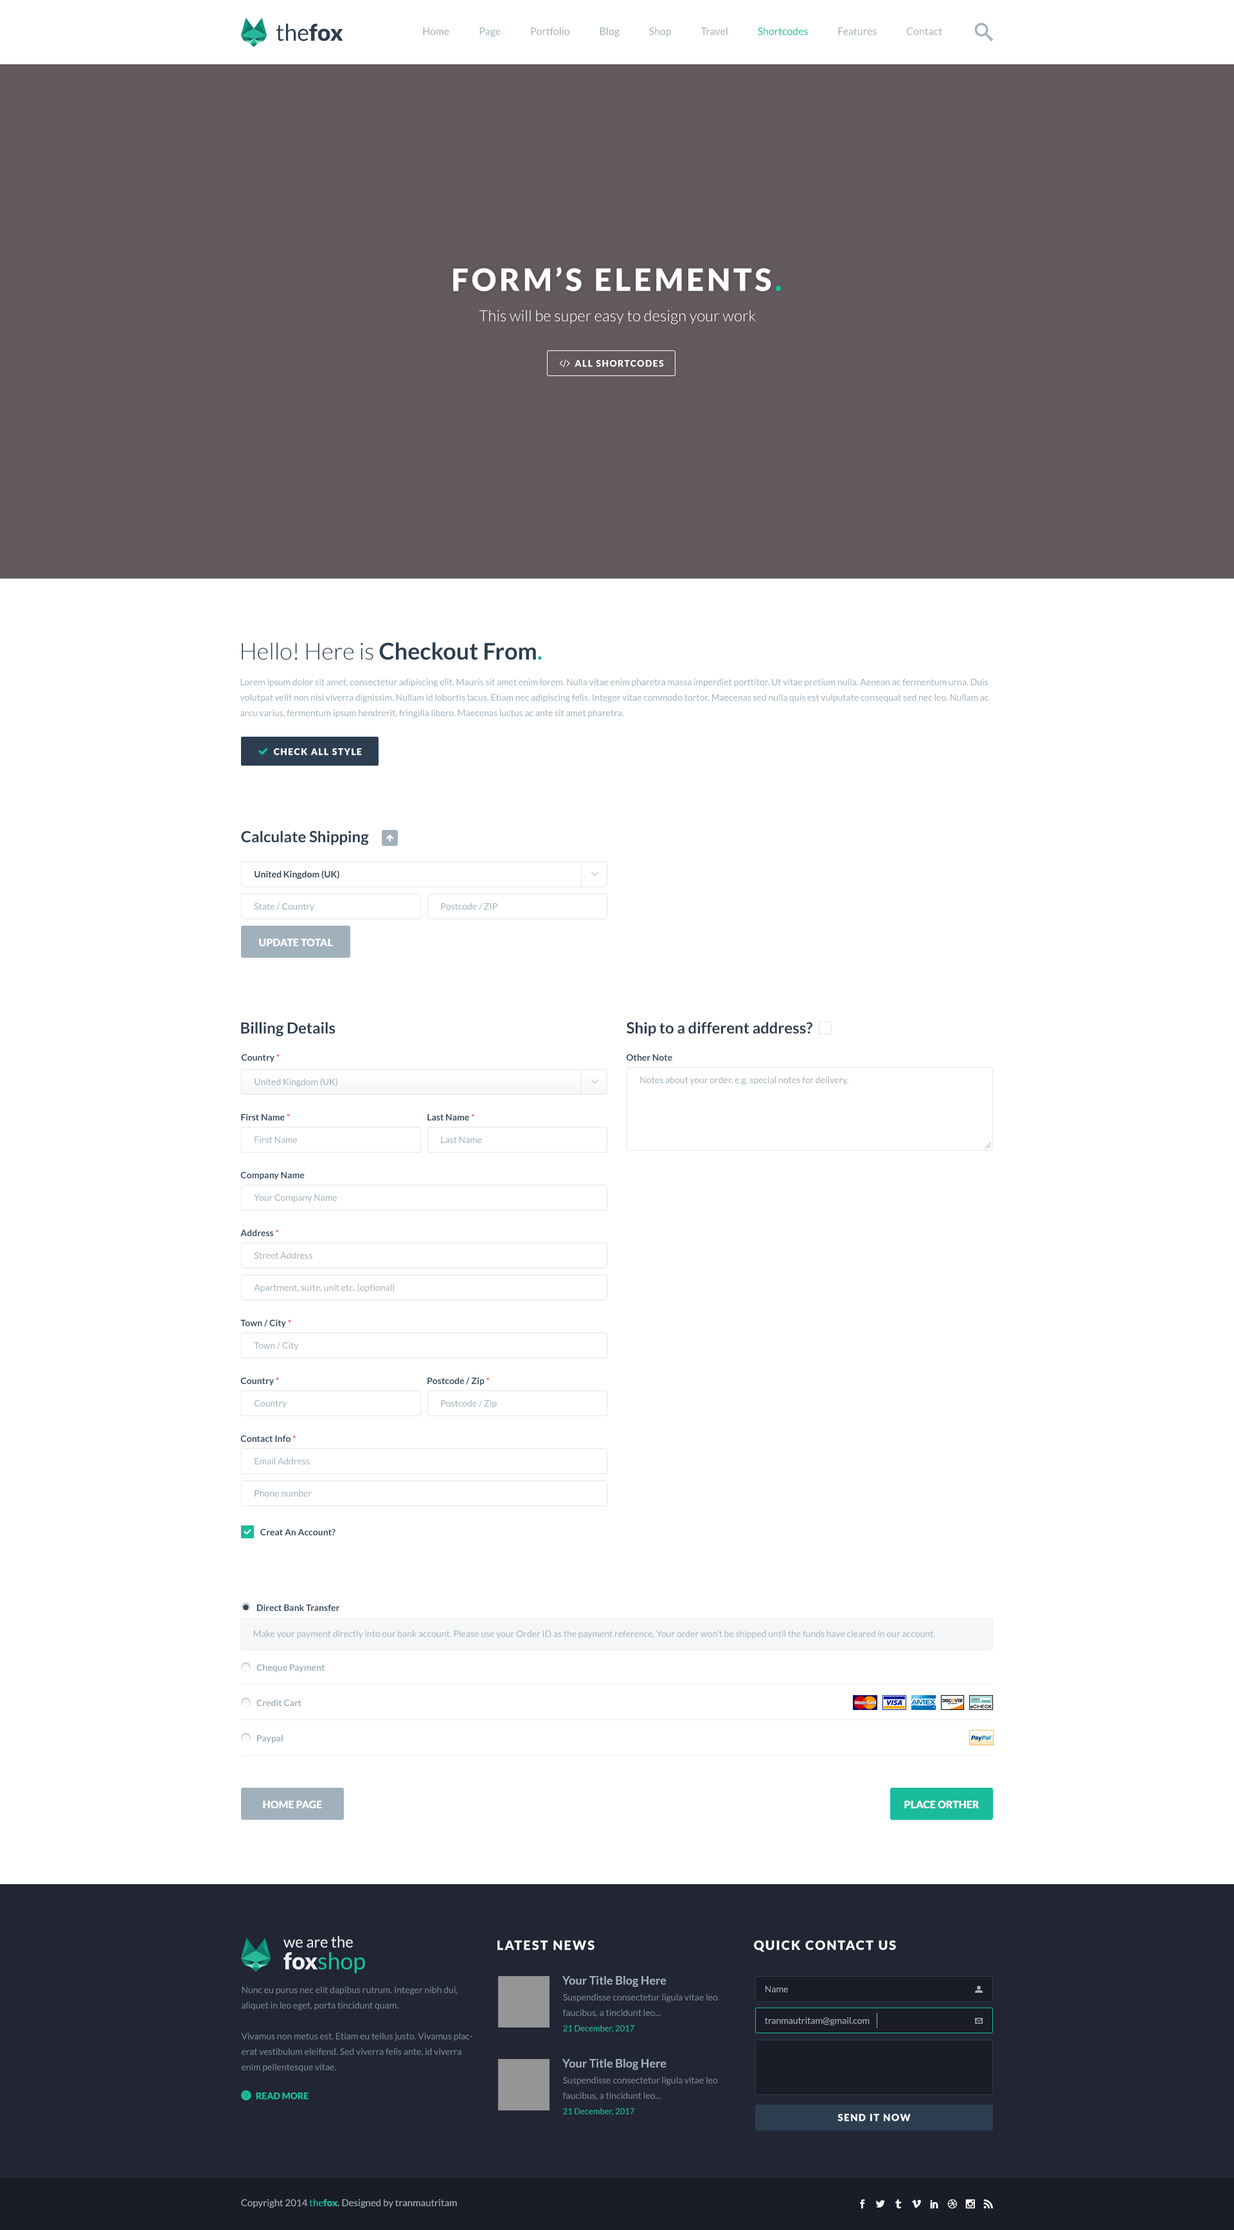
<style>
.page{position:relative;width:1234px;height:2230px;background:#ffffff}
.page>*{position:absolute;margin:0}
.t1{font:23.1px "Lato-Regular";color:#2c3e50}
.t2{font:23.1px "Lato-Black";color:#2c3e50}
.t3{font:10.3px "Lato-Regular";color:#a1b1bc}
.t4{font:10.3px "Lato-Regular";color:#1abc9c}
.t5{font:30.9px "Lato-Black";letter-spacing:0.1em;color:#ffffff;text-transform:uppercase}
.t6{font:30.9px "Lato-Black";letter-spacing:0.1em;color:#1abc9c;text-transform:uppercase}
.t7{font:15.4px "Lato-Light";color:#ffffff}
.t8{font:23.1px "Lato-Light";color:#2c3e50}
.t9{font:23.1px "Lato-Bold";color:#2c3e50}
.t10{font:23.1px "Lato-Bold";color:#1abc9c}
.t11{font:9px/15.4px "Lato-Regular";color:#a1b1bc}
.t12{font:9px "Lato-Black";letter-spacing:0.1em;color:#ffffff;text-transform:uppercase}
.t13{font:15.4px "Lato-Bold";color:#2c3e50}
.t14{font:9px "Lato-Bold";color:#2c3e50}
.t15{font:9px "Lato-Regular";color:#a1b1bc}
.t16{font:10.3px "Lato-Black";color:#ffffff}
.t17{font:9px "Lato-Bold";color:#34495e}
.t18{font:9px "Lato-Bold";color:#f54e33}
.t19{font:9px "Lato-Bold";color:#a1b1bc}
.t20{font:15.4px/21.9px "Lato-Regular";color:#ecf0f1}
.t21{font:23.1px/21.9px "Lato-Black";color:#ecf0f1}
.t22{font:23.1px/21.9px "Lato-Regular";color:#1abc9c}
.t23{font:12.9px "Lato-Black";letter-spacing:0.1em;color:#ffffff;text-transform:uppercase}
.t24{font:11.6px "Lato-Bold";color:#a1b1bc}
.t25{font:9px/15.4px "Lato-Regular";color:#758590}
.t26{font:8.4px/15.4px "Lato-Regular";color:#1abc9c}
.t27{font:9px "Lato-Black";color:#1abc9c}
.t28{font:9.6px "Lato-Black";letter-spacing:0.1em;color:#ffffff}
.t29{font:9.6px "Lato-Regular";color:#a1b1bc}
.t30{font:9.6px "Lato-Regular";color:#1abc9c}
.t31{font:9.6px "Lato-Black";color:#1abc9c}
</style>
<div class="page">
<p class="t1" style="left:276px;top:23px;width:67px;height:18px">the<span class="t2">fox</span></p>
<p class="t3" style="left:423px;top:27px;width:519px;height:10px">Home               Page               Portfolio               Blog               Shop               Travel               <span class="t4">Shortcodes               </span>Features               Contact</p>
<p class="t5" style="left:453px;top:267px;width:329px;height:24px">Form’s Elements<span class="t6">.</span></p>
<p class="t7" style="left:479px;top:310px;width:277px;height:15px">This will be super easy to design your work</p>
<p class="t8" style="left:242px;top:642px;width:300px;height:18px">Hello! Here is<span class="t9"> Checkout From</span><span class="t10">.</span></p>
<p class="t11" style="left:240px;top:678px;width:749px;height:40px">Lorem ipsum dolor sit amet, consectetur adipiscing elit. Mauris sit amet enim lorem. Nulla vitae enim pharetra massa imperdiet porttitor. Ut vitae pretium nulla. Aenean ac fermentum urna. Duis volutpat velit non nisi viverra dignissim. Nullam id lobortis lacus. Etiam nec adipiscing felis. Integer vitae commodo tortor. Maecenas sed nulla quis est vulputate consequat sed nec leo. Nullam ac arcu varius, fermentum ipsum hendrerit, fringilla libero. Maecenas luctus ac ante sit amet pharetra.</p>
<p class="t12" style="left:274px;top:748px;width:88px;height:7px">check all style</p>
<p class="t13" style="left:241px;top:831px;width:128px;height:14px">Calculate Shipping</p>
<p class="t14" style="left:255px;top:870px;width:84px;height:9px">United Kingdom (UK)</p>
<p class="t15" style="left:254px;top:903px;width:60px;height:9px">State / Country</p>
<p class="t15" style="left:441px;top:903px;width:57px;height:7px">Postcode / ZIP</p>
<p class="t16" style="left:259px;top:939px;width:74px;height:7px">UPDATE TOTAL</p>
<p class="t13" style="left:241px;top:1022px;width:95px;height:14px">Billing Details</p>
<p class="t13" style="left:627px;top:1022px;width:186px;height:14px">Ship to a different address?</p>
<p class="t17" style="left:241px;top:1054px;width:39px;height:9px">Country <span class="t18">*</span></p>
<p class="t17" style="left:626px;top:1054px;width:46px;height:7px">Other Note</p>
<p class="t15" style="left:255px;top:1078px;width:83px;height:9px">United Kingdom (UK)</p>
<p class="t15" style="left:640px;top:1076px;width:209px;height:9px">Notes about your order, e.g. special notes for delivery.</p>
<p class="t17" style="left:241px;top:1113px;width:49px;height:7px">First Name <span class="t18">*</span></p>
<p class="t17" style="left:428px;top:1113px;width:46px;height:7px">Last Name <span class="t18">*</span></p>
<p class="t15" style="left:255px;top:1136px;width:43px;height:7px">First Name</p>
<p class="t15" style="left:441px;top:1137px;width:41px;height:6px">Last Name</p>
<p class="t17" style="left:240px;top:1172px;width:65px;height:8px">Company Name</p>
<p class="t15" style="left:254px;top:1194px;width:83px;height:9px">Your Company Name</p>
<p class="t17" style="left:240px;top:1229px;width:39px;height:7px">Address <span class="t18">*</span></p>
<p class="t15" style="left:254px;top:1252px;width:58px;height:7px">Street Address</p>
<p class="t15" style="left:254px;top:1284px;width:141px;height:9px">Apartment, suite, unit etc. (optional)</p>
<p class="t17" style="left:240px;top:1319px;width:51px;height:9px">Town / City <span class="t18">*</span></p>
<p class="t15" style="left:254px;top:1342px;width:45px;height:9px">Town / City</p>
<p class="t17" style="left:240px;top:1377px;width:39px;height:9px">Country <span class="t18">*</span></p>
<p class="t17" style="left:428px;top:1377px;width:62px;height:9px">Postcode / Zip <span class="t18">*</span></p>
<p class="t15" style="left:255px;top:1400px;width:32px;height:8px">Country</p>
<p class="t15" style="left:441px;top:1400px;width:56px;height:8px">Postcode / Zip</p>
<p class="t17" style="left:240px;top:1435px;width:56px;height:7px">Contact Info <span class="t18">*</span></p>
<p class="t15" style="left:255px;top:1457px;width:55px;height:7px">Email Address</p>
<p class="t15" style="left:255px;top:1490px;width:57px;height:7px">Phone number</p>
<p class="t17" style="left:260px;top:1529px;width:76px;height:7px">Creat An Account?</p>
<p class="t17" style="left:257px;top:1604px;width:82px;height:7px">Direct Bank Transfer</p>
<p class="t15" style="left:253px;top:1630px;width:682px;height:9px">Make your payment directly into our bank account. Please use your Order ID as the payment reference. Your order won’t be shipped until the funds have cleared in our account.</p>
<p class="t19" style="left:256px;top:1664px;width:69px;height:9px">Cheque Payment</p>
<p class="t19" style="left:256px;top:1699px;width:46px;height:7px">Credit Cart</p>
<p class="t19" style="left:257px;top:1734px;width:26px;height:9px">Paypal</p>
<p class="t16" style="left:263px;top:1801px;width:59px;height:7px">HOME PAGE</p>
<p class="t16" style="left:905px;top:1801px;width:75px;height:7px">PLACE ORTHER</p>
<p class="t20" style="left:284px;top:1936px;width:81px;height:38px">we are the<br><span class="t21">fox</span><span class="t22">shop</span></p>
<p class="t23" style="left:498px;top:1940px;width:97px;height:10px">Latest News</p>
<p class="t23" style="left:754px;top:1940px;width:142px;height:12px">quick contact us</p>
<p class="t24" style="left:562px;top:1976px;width:105px;height:11px">Your Title Blog Here</p>
<p class="t15" style="left:766px;top:1986px;width:22px;height:7px">Name</p>
<p class="t25" style="left:241px;top:1986px;width:232px;height:86px">Nunc eu purus nec elit dapibus rutrum. Integer nibh dui, aliquet in leo eget, porta tincidunt quam. <br><br>Vivamus non metus est. Etiam eu tellus justo. Vivamus placerat vestibulum eleifend. Sed viverra felis ante, id viverra enim pellentesque vitae.</p>
<p class="t25" style="left:563px;top:1994px;width:155px;height:39px">Suspendisse consectetur ligula vitae leo faucibus, a tincidunt leo...<br><span class="t26">21 December, 2017</span></p>
<p class="t15" style="left:765px;top:2017px;width:105px;height:9px">tranmautritam@gmail.com</p>
<p class="t24" style="left:562px;top:2058px;width:105px;height:12px">Your Title Blog Here</p>
<p class="t25" style="left:563px;top:2076px;width:155px;height:40px">Suspendisse consectetur ligula vitae leo faucibus, a tincidunt leo...<br><span class="t26">21 December, 2017</span></p>
<p class="t27" style="left:256px;top:2092px;width:53px;height:8px">READ MORE</p>
<p class="t28" style="left:838px;top:2114px;width:73px;height:7px">SEND IT NOW</p>
<p class="t29" style="left:241px;top:2199px;width:216px;height:9px">Copyright 2014 <span class="t30">the</span><span class="t31">fox</span>. Designed by tranmautritam</p>
</div>
